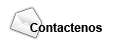
<style>
.page{position:relative;width:124px;height:45px;background:#ffffff}
.page>*{position:absolute;margin:0}
.t1{font:12px "Arial-BoldMT";color:#000000}
</style>
<div class="page">
<p class="t1" style="left:30px;top:23px;width:72px;height:9px">Contactenos</p>
</div>
